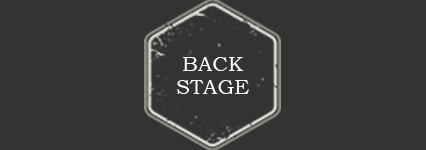
<style>
.page{position:relative;width:426px;height:150px;background:#333333}
.page>*{position:absolute;margin:0}
.t1{font:21.1px "BookmanOldStyle";color:#ffffff}
</style>
<div class="page">
<p class="t1" style="left:183px;top:57px;width:61px;height:14px">BACK</p>
<p class="t1" style="left:177px;top:80px;width:72px;height:14px">STAGE</p>
</div>
